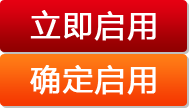
<style>
.page{position:relative;width:189px;height:108px}
.page>*{position:absolute;margin:0}
.t1{font:30px "MicrosoftYaHei";letter-spacing:0.05em;color:#ffffff;font-weight:bold}
</style>
<div class="page">
<p class="t1" style="left:30px;top:10px;width:126px;height:31px">立即启用</p>
<p class="t1" style="left:30px;top:65px;width:126px;height:30px">确定启用</p>
</div>
